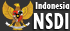
<style>
.page{position:relative;width:70px;height:31px;background:#333333}
.page>*{position:absolute;margin:0}
.t1{font:10.4px "TwCenMT-CondensedExtraBold";color:#ffffff;scale:0.9 1}
.t2{font:24.5px "TwCenMT-CondensedExtraBold";color:#ffffff;scale:0.8 1}
</style>
<div class="page">
<p class="t1" style="left:35px;top:2px;width:35px;height:7px">Indonesia</p>
<p class="t2" style="left:33px;top:13px;width:36px;height:16px">NSDI</p>
</div>
